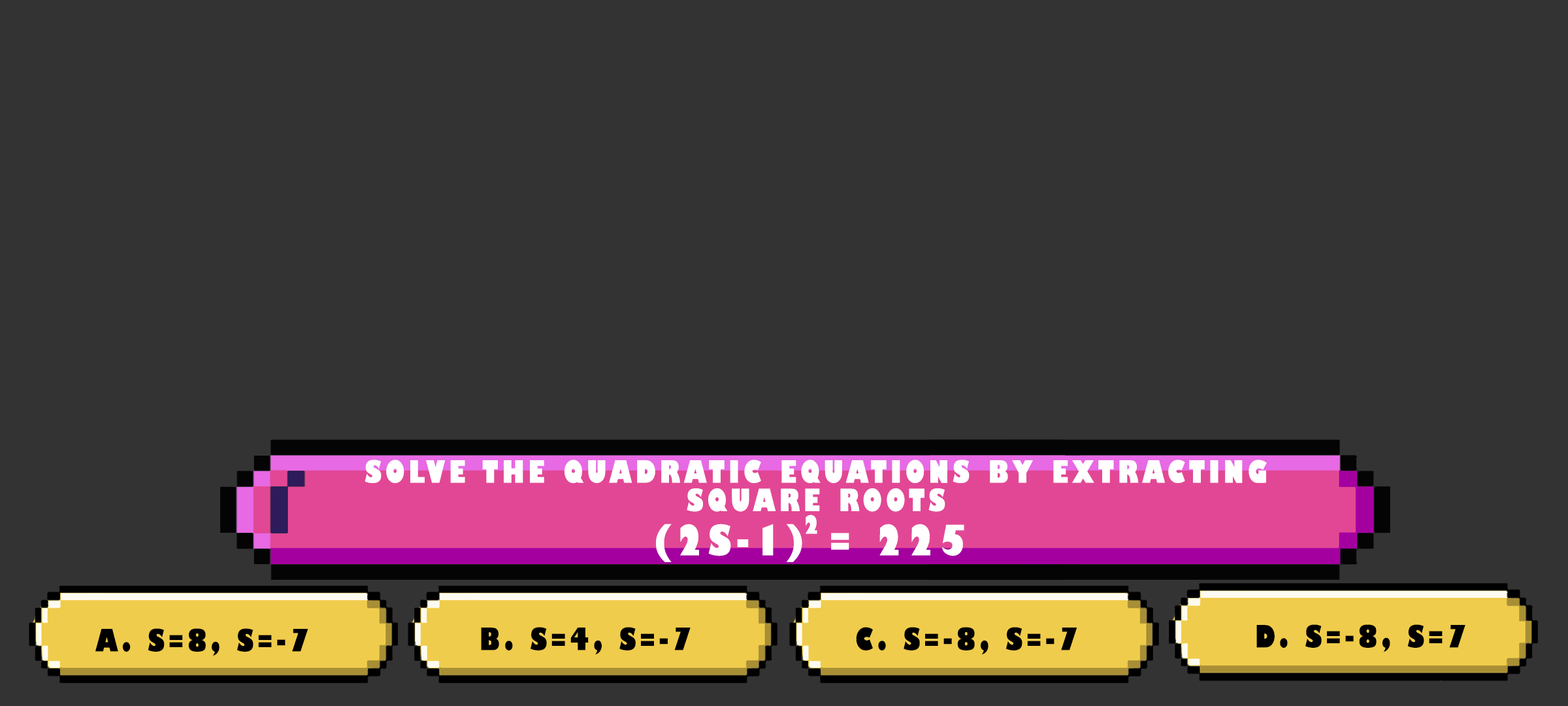
<style>
.page{position:relative;width:1568px;height:706px;background:#333333}
.page>*{position:absolute;margin:0}
.t1{font:30px/28.4px "GillSans-UltraBoldCondensed";letter-spacing:0.115em;color:#ffffff;text-transform:uppercase;scale:1.12 1}
.t2{font:24.5px "GillSans-UltraBoldCondensed";letter-spacing:0.115em;color:#ffffff;text-transform:uppercase;scale:1.12 1}
.t3{font:40.8px "GillSans-UltraBoldCondensed";letter-spacing:0.115em;color:#ffffff;text-transform:uppercase;scale:1.12 1}
.t4{font:29.9px "GillSans-UltraBoldCondensed";letter-spacing:0.115em;color:#000000;text-transform:uppercase;scale:1.12 1}
</style>
<div class="page">
<p class="t1" style="left:365px;top:459px;width:902px;height:53px;text-align:center">solve the quadratic equations by extracting<br>square roots</p>
<p class="t2" style="left:806px;top:514px;width:11px;height:20px">2</p>
<p class="t3" style="left:656px;top:523px;width:308px;height:39px">(2s-1) = 225</p>
<p class="t4" style="left:95px;top:628px;width:213px;height:27px">a. S=8, S=-7</p>
<p class="t4" style="left:481px;top:627px;width:210px;height:27px">b. S=4, S=-7</p>
<p class="t4" style="left:856px;top:627px;width:221px;height:27px">c. S=-8, S=-7</p>
<p class="t4" style="left:1256px;top:624px;width:209px;height:27px">d. S=-8, S=7</p>
</div>
